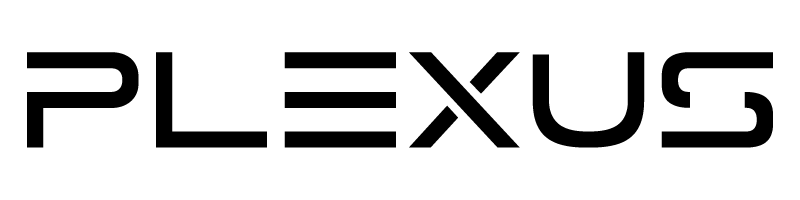
<style>
.page{position:relative;width:800px;height:200px;background:#ffffff}
.page>*{position:absolute;margin:0}
.t1{font:157px "Tele-Marines";color:#000000}
</style>
<div class="page">
<p class="t1" style="left:27px;top:52px;width:746px;height:96px">PLeXUs</p>
</div>
